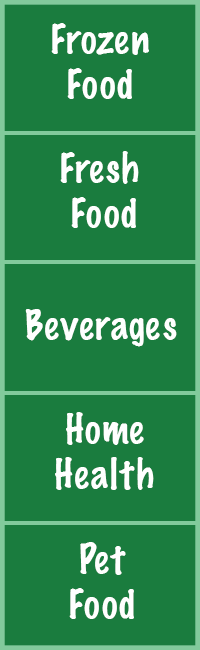
<style>
.page{position:relative;width:200px;height:650px;background:#1a7c3e}
.page>*{position:absolute;margin:0}
.t1{font:37.5px "MarkerFelt-Thin";color:#fefffe}
</style>
<div class="page">
<p class="t1" style="left:51px;top:23px;width:98px;height:76px;text-align:center">Frozen<br>Food</p>
<p class="t1" style="left:60px;top:151px;width:79px;height:77px;text-align:center">Fresh <br>Food</p>
<p class="t1" style="left:25px;top:309px;width:152px;height:38px">Beverages</p>
<p class="t1" style="left:55px;top:412px;width:99px;height:78px;text-align:center">Home<br>Health</p>
<p class="t1" style="left:69px;top:542px;width:65px;height:77px;text-align:center">Pet<br>Food</p>
</div>
